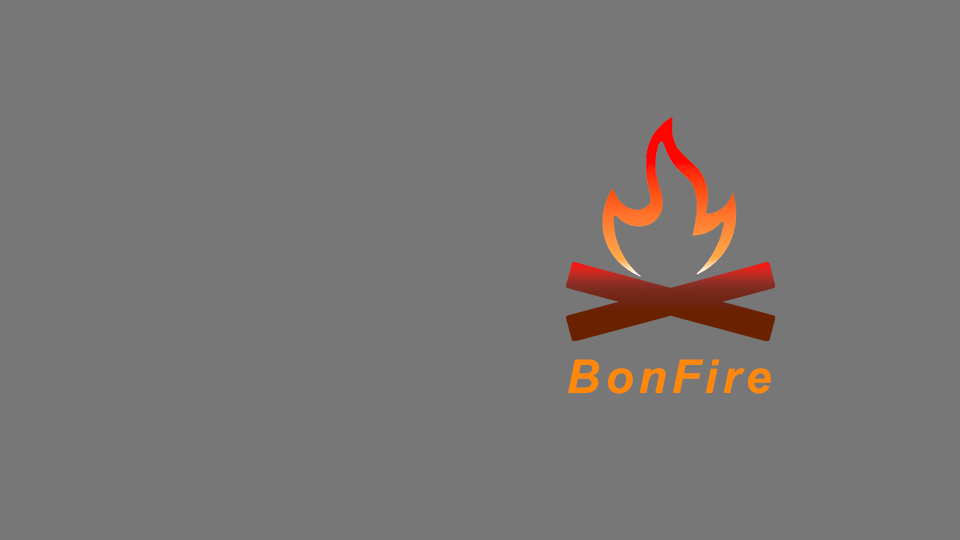
<style>
.page{position:relative;width:960px;height:540px;background:#777777}
.page>*{position:absolute;margin:0}
.t1{font:46.7px "Arial-BoldItalicMT";letter-spacing:0.1em;color:#ff8809}
</style>
<div class="page">
<p class="t1" style="left:568px;top:359px;width:203px;height:35px">BonFire</p>
</div>
